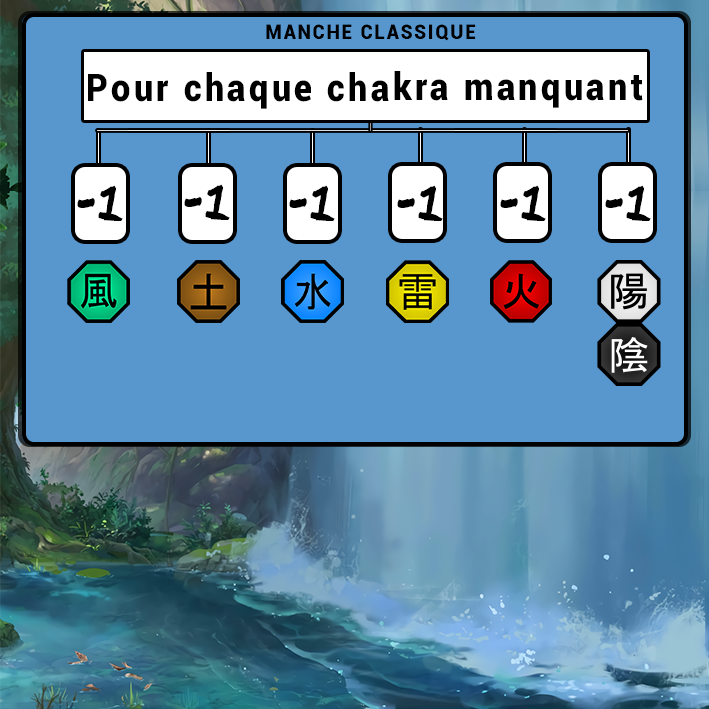
<style>
.page{position:relative;width:709px;height:709px;background:#5897cd}
.page>*{position:absolute;margin:0}
.t1{font:20.8px "Roboto-Black";letter-spacing:0.1em;color:#000000;scale:0.9 1}
.t2{font:38px "Roboto-Black";letter-spacing:0.1em;color:#000000;scale:0.9 1}
.t3{font:39.3px "Ninja-Naruto";letter-spacing:0.1em;color:#000000;scale:0.9 1}
</style>
<div class="page">
<p class="t1" style="left:266px;top:24px;width:210px;height:17px">MANCHE CLASSIQUE</p>
<p class="t2" style="left:88px;top:71px;width:555px;height:38px">Pour chaque chakra manquant</p>
<p class="t3" style="left:77px;top:185px;width:46px;height:36px">-1</p>
<p class="t3" style="left:184px;top:184px;width:46px;height:36px">-1</p>
<p class="t3" style="left:289px;top:185px;width:46px;height:36px">-1</p>
<p class="t3" style="left:397px;top:185px;width:46px;height:36px">-1</p>
<p class="t3" style="left:500px;top:185px;width:46px;height:36px">-1</p>
<p class="t3" style="left:605px;top:185px;width:46px;height:36px">-1</p>
</div>
